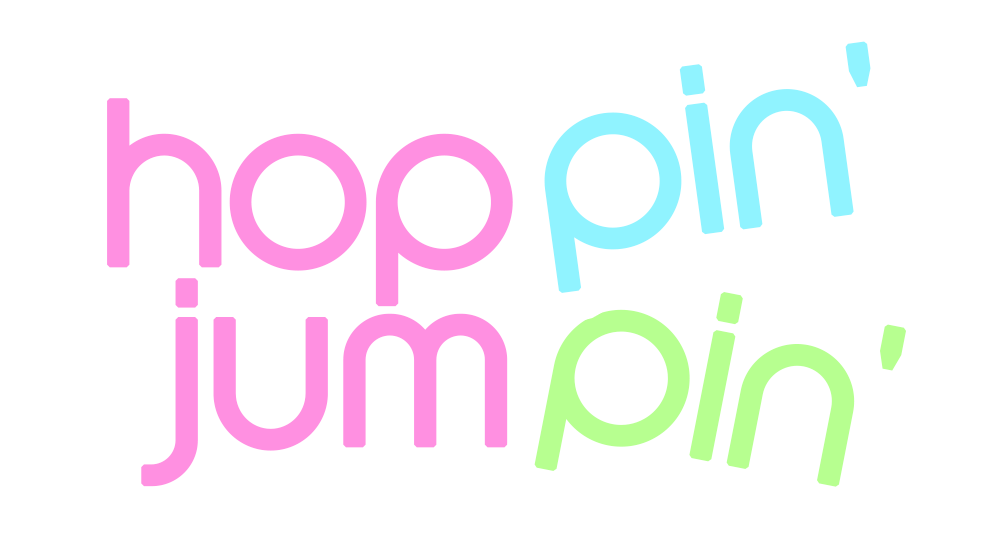
<style>
.page{position:relative;width:1000px;height:550px;background:#ffffff}
.page>*{position:absolute;margin:0}
.t1{font:200px "Y1CandyCoreRegular";color:#90f3ff;font-weight:bold}
.t2{font:200px/180px "Y1CandyCoreRegular";color:#ff90e1;font-weight:bold}
.t3{font:200px "Y1CandyCoreRegular";color:#b7ff90;font-weight:bold}
</style>
<div class="page">
<p class="t1" style="left:544px;top:41px;width:327px;height:252px;rotate:-8deg">pin’</p>
<p class="t2" style="left:107px;top:98px;width:406px;height:389px;text-align:center">HOP <br>jum</p>
<p class="t3" style="left:534px;top:292px;width:372px;height:195px;rotate:11deg">pin’</p>
</div>
